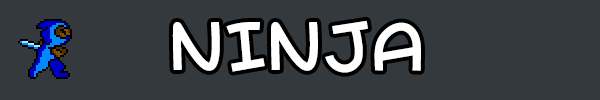
<style>
.page{position:relative;width:600px;height:100px;background:#34393d}
.page>*{position:absolute;margin:0}
.t1{font:59.8px "WarioWareInc";letter-spacing:0.05em;color:#ffffff}
</style>
<div class="page">
<p class="t1" style="left:172px;top:20px;width:249px;height:53px">NINJA</p>
</div>
